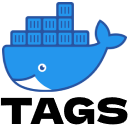
<style>
.page{position:relative;width:128px;height:128px;background:#ffffff}
.page>*{position:absolute;margin:0}
.t1{font:36px "DelaGothicOne-Regular";color:#000000}
</style>
<div class="page">
<p class="t1" style="left:0px;top:97px;width:128px;height:28px">TAGS</p>
</div>
